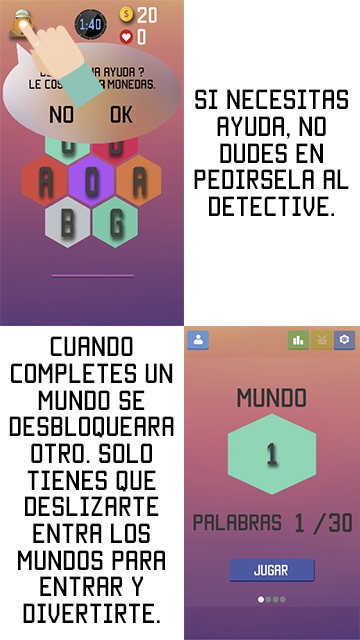
<style>
.page{position:relative;width:360px;height:640px;background:#ffffff}
.page>*{position:absolute;margin:0}
.t1{font:22.2px "Manteka";color:#000000}
</style>
<div class="page">
<p class="t1" style="left:194px;top:89px;width:155px;height:127px;text-align:center">Si necesitas ayuda, no dudes en <br>pedirsela al <br>detective.</p>
<p class="t1" style="left:9px;top:336px;width:165px;height:287px;text-align:center">Cuando <br>completes un mundo se <br>desbloqueara otro. Solo tienes que deslizarte entra los mundos para entrar y <br>divertirte.</p>
</div>
